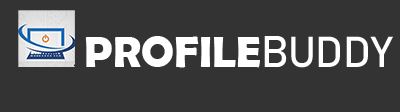
<style>
.page{position:relative;width:400px;height:112px;background:#333333}
.page>*{position:absolute;margin:0}
.t1{font:44px "BerlinSansFBDemi-Bold";color:#ffffff}
.t2{font:42.7px "Bahnschrift";color:#ffffff}
</style>
<div class="page">
<p class="t1" style="left:85px;top:36px;width:308px;height:32px">PROFILE<span class="t2">BUDDY</span></p>
</div>
